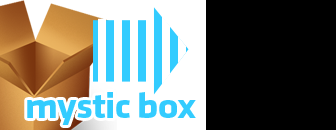
<style>
.page{position:relative;width:336px;height:130px;background:#000000}
.page>*{position:absolute;margin:0}
.t1{font:37.2px "Klavika-Bold";letter-spacing:-0.025em;color:#33ccff;scale:1.06 1}
</style>
<div class="page">
<p class="t1" style="left:27px;top:92px;width:169px;height:33px">mystic box</p>
</div>
